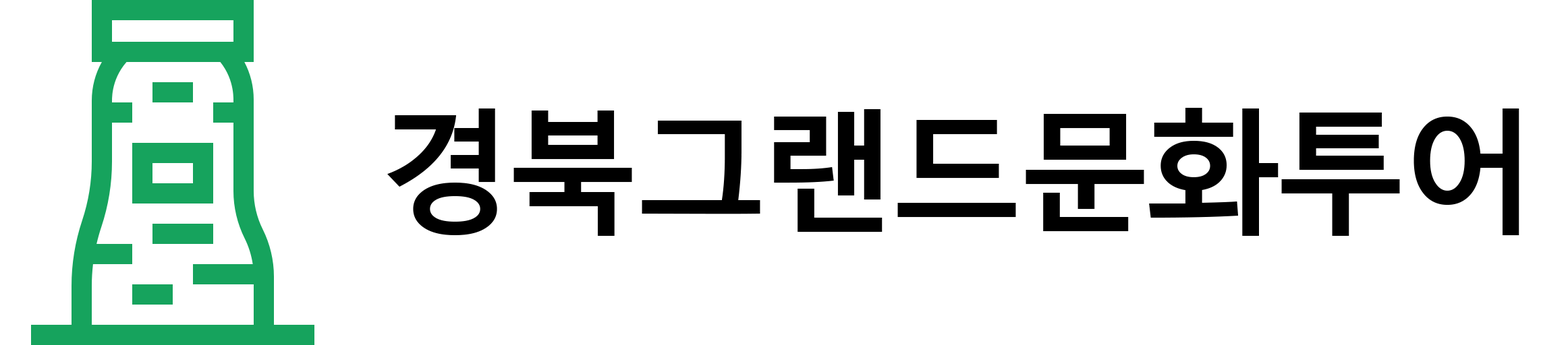
<style>
.page{position:relative;width:1568px;height:345px;background:#ffffff}
.page>*{position:absolute;margin:0}
.t1{font:134.7px "MalgunGothicBold";letter-spacing:-0.05em;color:#000000}
</style>
<div class="page">
<p class="t1" style="left:387px;top:108px;width:1132px;height:128px">경북그랜드문화투어</p>
</div>
